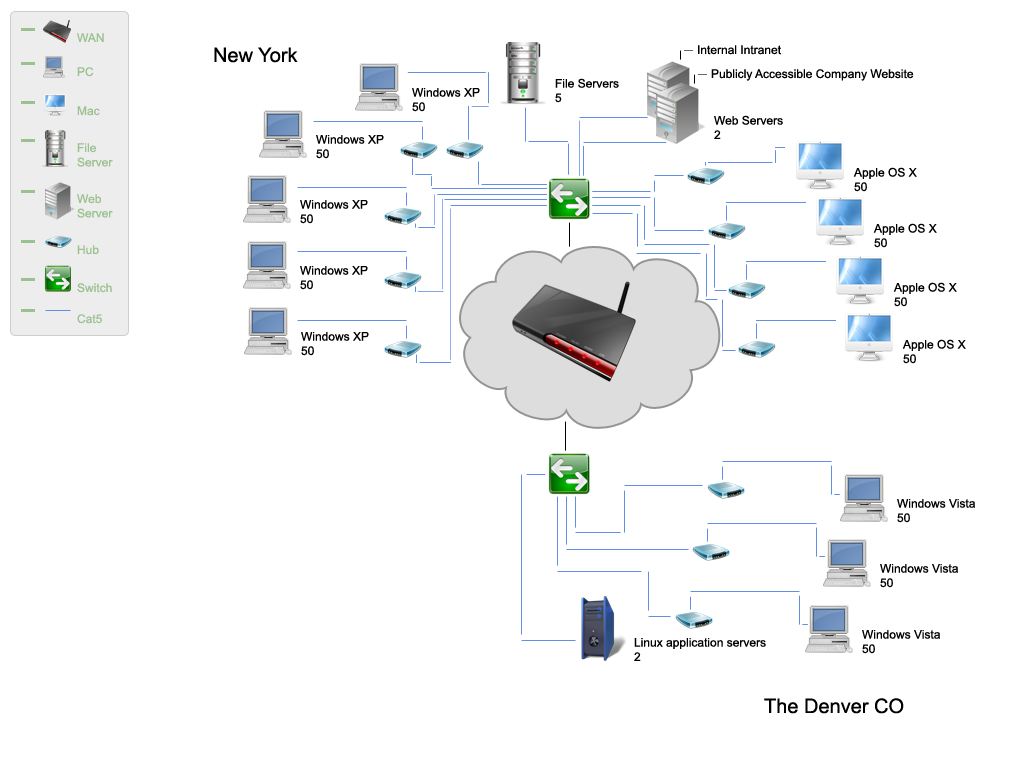
<style>
.page{position:relative;width:1024px;height:768px;background:#ffffff}
.page>*{position:absolute;margin:0}
.t1{font:12px "ArialMT";color:#9bc190}
.t2{font:20px "ArialMT";color:#000000}
.t3{font:12px "ArialMT";color:#000000}
</style>
<div class="page">
<p class="t1" style="left:77px;top:33px;width:27px;height:9px">WAN</p>
<p class="t2" style="left:214px;top:47px;width:84px;height:16px">New York</p>
<p class="t3" style="left:698px;top:45px;width:83px;height:10px">Internal Intranet</p>
<p class="t1" style="left:77px;top:67px;width:17px;height:10px">PC</p>
<p class="t3" style="left:555px;top:78px;width:64px;height:25px">File Servers<br>5</p>
<p class="t3" style="left:711px;top:69px;width:203px;height:12px">Publicly Accessible Company Website</p>
<p class="t3" style="left:412px;top:88px;width:68px;height:24px">Windows XP<br>50</p>
<p class="t1" style="left:77px;top:106px;width:23px;height:10px">Mac</p>
<p class="t3" style="left:714px;top:115px;width:69px;height:24px">Web Servers<br>2</p>
<p class="t3" style="left:316px;top:135px;width:68px;height:24px">Windows XP<br>50</p>
<p class="t1" style="left:77px;top:143px;width:36px;height:24px">File<br>Server</p>
<p class="t3" style="left:853px;top:167px;width:64px;height:25px">Apple OS X<br>50</p>
<p class="t1" style="left:77px;top:194px;width:36px;height:24px">Web<br>Server</p>
<p class="t3" style="left:300px;top:200px;width:68px;height:24px">Windows XP<br>50</p>
<p class="t3" style="left:873px;top:223px;width:64px;height:25px">Apple OS X<br>50</p>
<p class="t1" style="left:77px;top:245px;width:22px;height:10px">Hub</p>
<p class="t3" style="left:300px;top:266px;width:68px;height:24px">Windows XP<br>50</p>
<p class="t1" style="left:77px;top:283px;width:35px;height:10px">Switch</p>
<p class="t3" style="left:893px;top:282px;width:64px;height:25px">Apple OS X<br>50</p>
<p class="t1" style="left:77px;top:314px;width:25px;height:10px">Cat5</p>
<p class="t3" style="left:301px;top:332px;width:68px;height:24px">Windows XP<br>50</p>
<p class="t3" style="left:902px;top:339px;width:64px;height:25px">Apple OS X<br>50</p>
<p class="t3" style="left:897px;top:499px;width:78px;height:24px">Windows Vista<br>50</p>
<p class="t3" style="left:880px;top:564px;width:78px;height:24px">Windows Vista<br>50</p>
<p class="t3" style="left:862px;top:630px;width:78px;height:24px">Windows Vista<br>50</p>
<p class="t3" style="left:634px;top:638px;width:132px;height:23px">Linux application servers<br>2</p>
<p class="t2" style="left:764px;top:698px;width:140px;height:16px">The Denver CO</p>
</div>
